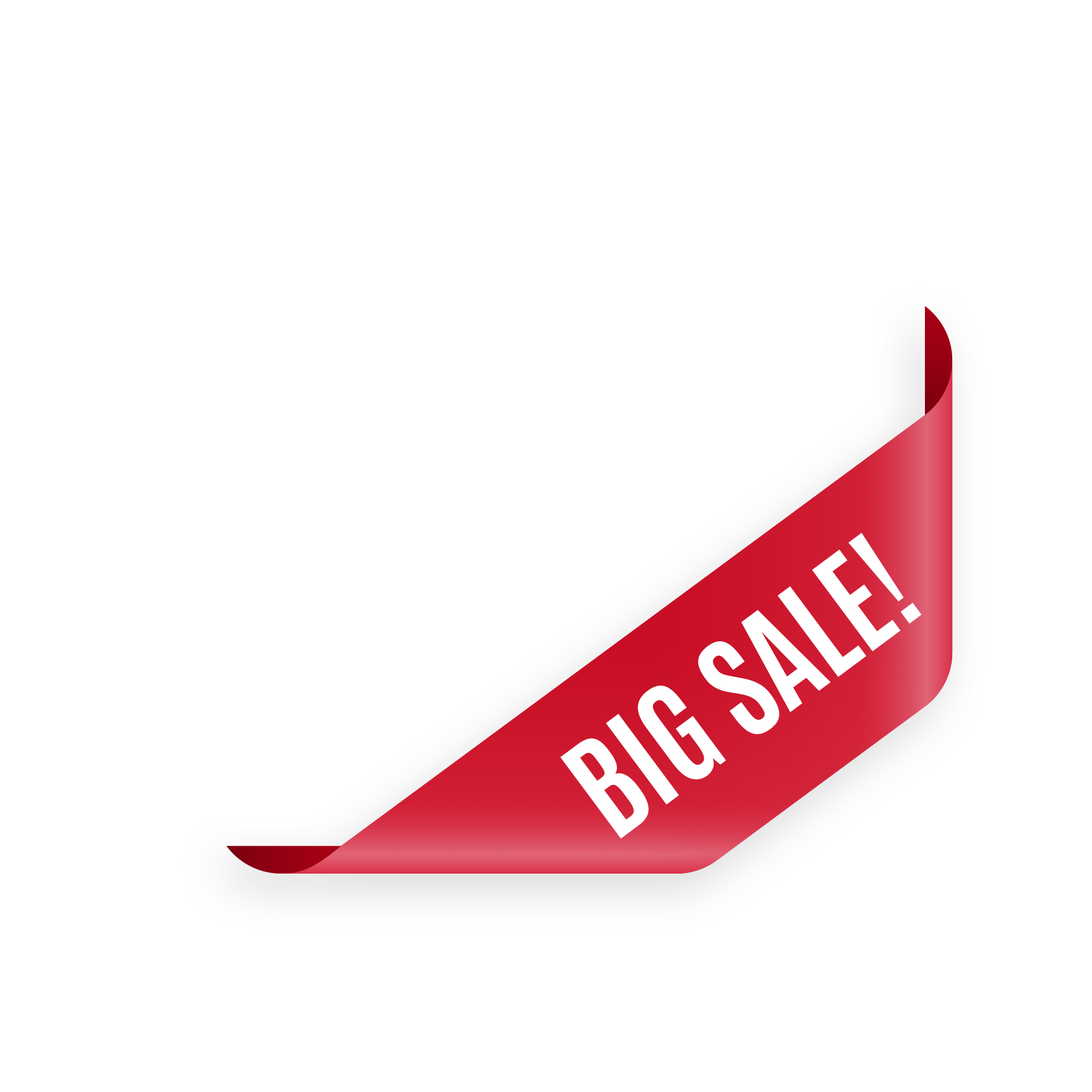
<style>
.page{position:relative;width:1092px;height:1092px;background:#ffffff}
.page>*{position:absolute;margin:0}
.t1{font:117.9px "Antonio-Bold";color:#ffffff;text-transform:uppercase}
</style>
<div class="page">
<p class="t1" style="left:560px;top:532px;width:362px;height:307px;rotate:-37deg">BIG SALE!</p>
</div>
